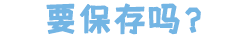
<style>
.page{position:relative;width:247px;height:37px;background:#ffffff}
.page>*{position:absolute;margin:0}
.t1{font:33.7px "shetumodengxiaofangti";color:#73b5e4;font-weight:bold}
</style>
<div class="page">
<p class="t1" style="left:46px;top:3px;width:155px;height:32px">要保存吗？</p>
</div>
